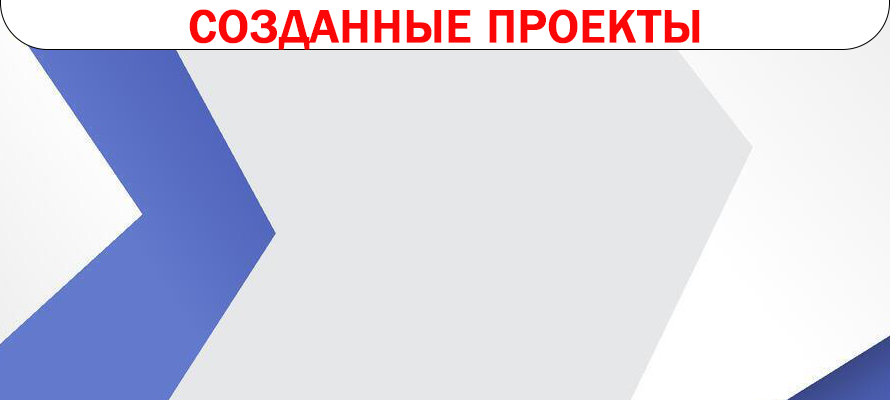
<style>
.page{position:relative;width:890px;height:400px;background:#e6e7e9}
.page>*{position:absolute;margin:0}
.t1{font:48px "FranklinGothic-Medium";color:#fc0707;text-transform:uppercase;font-weight:bold}
</style>
<div class="page">
<p class="t1" style="left:189px;top:9px;width:511px;height:41px">Созданные проекты</p>
</div>
